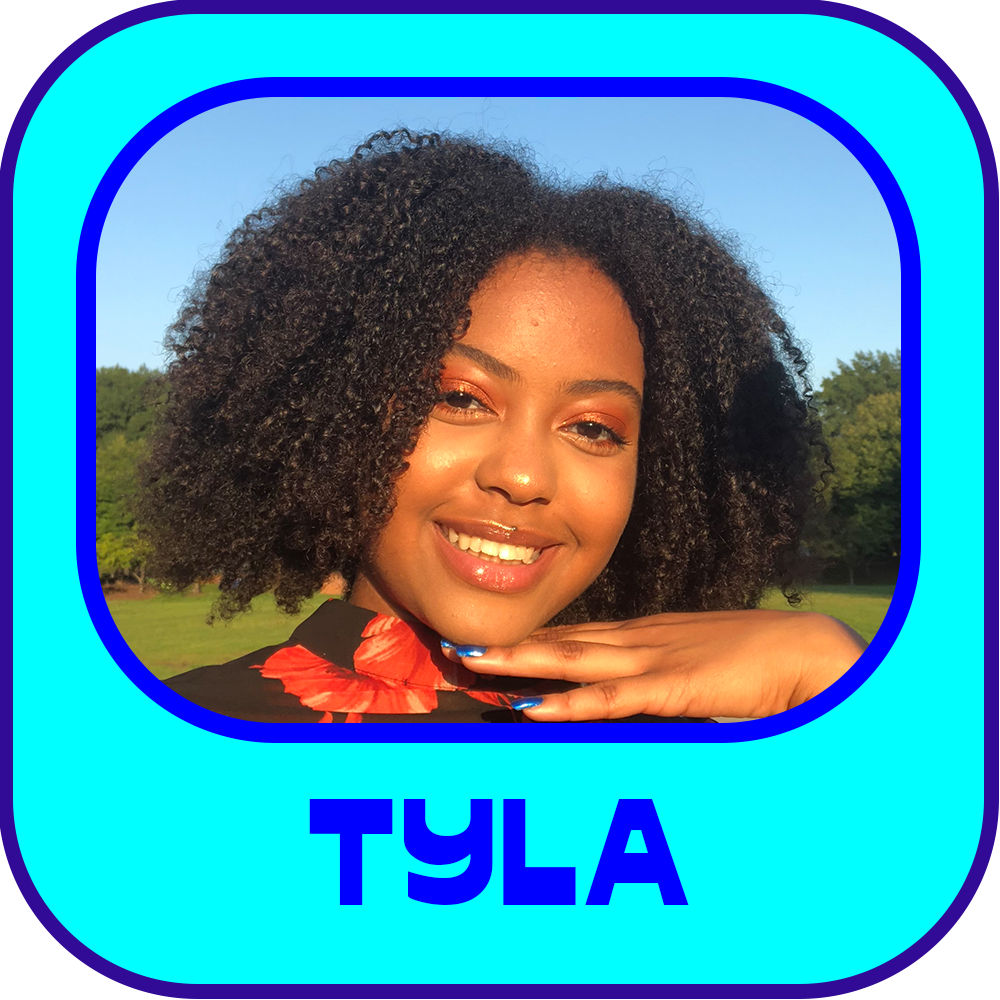
<style>
.page{position:relative;width:1000px;height:1000px;background:#00ffff}
.page>*{position:absolute;margin:0}
.t1{font:145.8px "Glockenspiel";color:#0000ff}
</style>
<div class="page">
<p class="t1" style="left:309px;top:799px;width:380px;height:106px">TYLA</p>
</div>
